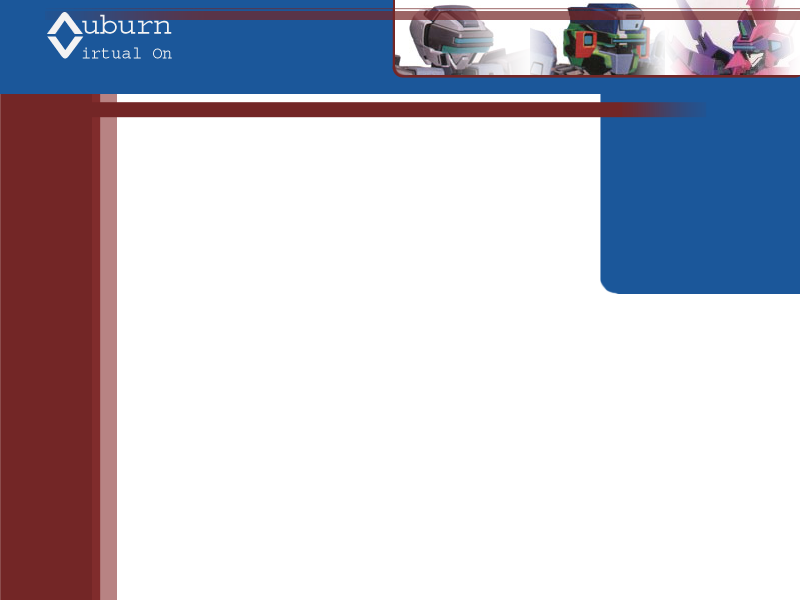
<style>
.page{position:relative;width:800px;height:600px;background:#ffffff}
.page>*{position:absolute;margin:0}
.t1{font:30px "Courier";color:#f3f3f3}
.t2{font:30px "Ethnocentric";color:#f3f3f3}
.t3{font:17px "Courier";color:#f3f3f3}
</style>
<div class="page">
<p class="t1" style="left:82px;top:14px;width:90px;height:20px">uburn</p>
<p class="t2" style="left:47px;top:36px;width:37px;height:23px">V</p>
<p class="t3" style="left:82px;top:47px;width:90px;height:12px">irtual On</p>
</div>
